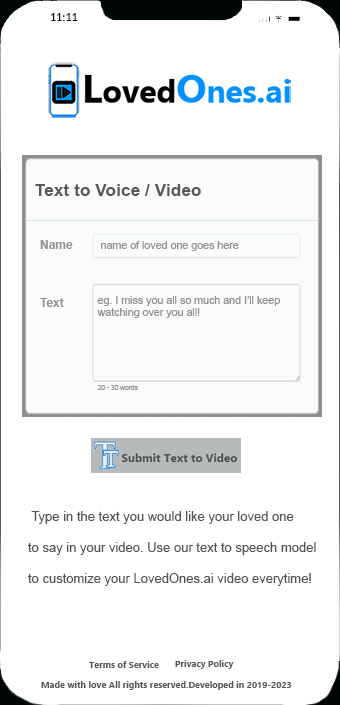
<style>
.page{position:relative;width:340px;height:705px;background:#ffffff}
.page>*{position:absolute;margin:0}
.t1{font:12px "Carlito";color:#000000}
.t2{font:13px "ArialMT";color:#525556}
.t3{font:9px "Ebrima-Bold";color:#525556}
</style>
<div class="page">
<p class="t1" style="left:50px;top:13px;width:28px;height:8px">11:11</p>
<p class="t2" style="left:28px;top:511px;width:288px;height:75px">Type in the text you would like your loved one <br><br>to say in your video. Use our text to speech model<br><br>to customize your LovedOnes.ai video everytime!</p>
<p class="t3" style="left:89px;top:661px;width:70px;height:7px">Terms of Service</p>
<p class="t3" style="left:175px;top:660px;width:59px;height:9px">Privacy Policy</p>
<p class="t3" style="left:41px;top:681px;width:250px;height:9px">Made with love All rights reserved.Developed in 2019-2023</p>
</div>
